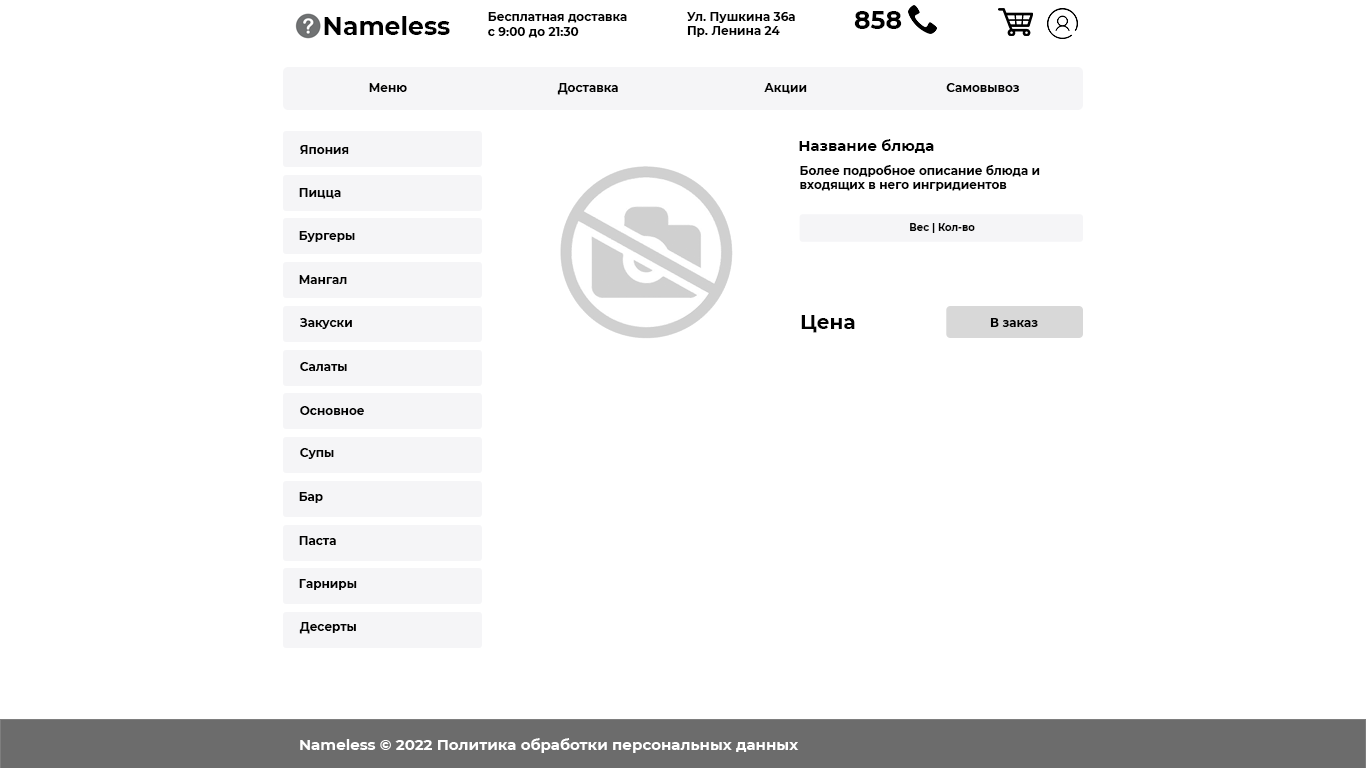
<style>
.page{position:relative;width:1366px;height:768px;background:#ffffff}
.page>*{position:absolute;margin:0}
.t1{font:25px "Montserrat-Bold";color:#000000}
.t2{font:12px "Montserrat-Bold";color:#000000}
.t3{font:12px "Montserrat-Bold";color:#010101}
.t4{font:15px "Montserrat-Bold";color:#010101}
.t5{font:10px "Montserrat-Bold";color:#010101}
.t6{font:20px "Montserrat-Bold";color:#010101}
.t7{font:15px "Montserrat-Bold";color:#ffffff}
</style>
<div class="page">
<p class="t1" style="left:324px;top:16px;width:126px;height:19px">Nameless</p>
<p class="t2" style="left:488px;top:12px;width:139px;height:26px">Бесплатная доставка<br>с 9:00 до 21:30</p>
<p class="t2" style="left:687px;top:12px;width:108px;height:25px">Ул. Пушкина 36а<br>Пр. Ленина 24</p>
<p class="t1" style="left:854px;top:11px;width:48px;height:18px">858</p>
<p class="t2" style="left:369px;top:83px;width:38px;height:9px">Меню</p>
<p class="t2" style="left:557px;top:83px;width:61px;height:12px">Доставка</p>
<p class="t2" style="left:764px;top:83px;width:43px;height:11px">Акции</p>
<p class="t2" style="left:946px;top:83px;width:74px;height:9px">Самовывоз</p>
<p class="t3" style="left:300px;top:145px;width:49px;height:9px">Япония</p>
<p class="t4" style="left:799px;top:139px;width:135px;height:14px">Название блюда</p>
<p class="t3" style="left:800px;top:165px;width:240px;height:26px">Более подробное описание блюда и входящих в него ингридиентов</p>
<p class="t3" style="left:299px;top:188px;width:42px;height:11px">Пицца</p>
<p class="t3" style="left:299px;top:231px;width:56px;height:11px">Бургеры</p>
<p class="t5" style="left:910px;top:223px;width:65px;height:10px">Вес | Кол-во</p>
<p class="t3" style="left:299px;top:275px;width:48px;height:9px">Мангал</p>
<p class="t3" style="left:300px;top:318px;width:52px;height:11px">Закуски</p>
<p class="t6" style="left:801px;top:315px;width:54px;height:18px">Цена</p>
<p class="t3" style="left:990px;top:318px;width:48px;height:9px">В заказ</p>
<p class="t3" style="left:300px;top:362px;width:47px;height:9px">Салаты</p>
<p class="t3" style="left:300px;top:406px;width:64px;height:9px">Основное</p>
<p class="t3" style="left:300px;top:448px;width:34px;height:11px">Супы</p>
<p class="t3" style="left:299px;top:492px;width:24px;height:11px">Бар</p>
<p class="t3" style="left:299px;top:536px;width:37px;height:9px">Паста</p>
<p class="t3" style="left:299px;top:579px;width:58px;height:11px">Гарниры</p>
<p class="t3" style="left:299px;top:622px;width:57px;height:12px">Десерты</p>
<p class="t7" style="left:300px;top:738px;width:499px;height:15px">Nameless © 2022 Политика обработки персональных данных</p>
</div>
